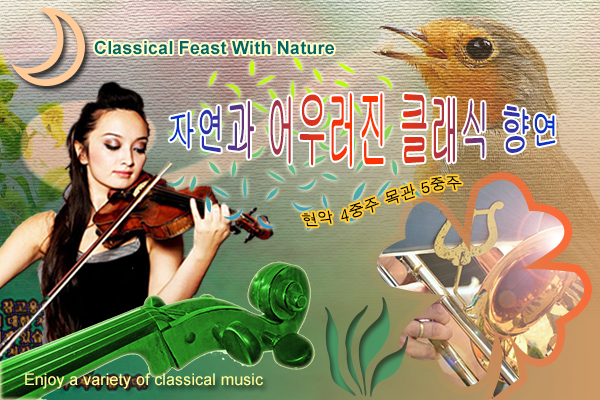
<style>
.page{position:relative;width:600px;height:400px}
.page>*{position:absolute;margin:0}
.t1{font:18px "Arial-BoldMT";letter-spacing:0.01em;color:#006666}
.t2{font:30px "Gulim";letter-spacing:0.01em}
.t3{font:16px "Dotum";letter-spacing:0.01em;color:#000000}
.t4{font:16px "ArialMT";letter-spacing:0.01em;color:#ffff99}
</style>
<div class="page">
<p class="t1" style="left:94px;top:40px;width:240px;height:15px">Classical Feast With Nature</p>
<p class="t2" style="left:169px;top:93px;width:387px;height:74px;text-align:center">자연과 어우러진 클래식 향연</p>
<p class="t3" style="left:301px;top:176px;width:161px;height:51px;rotate:-13deg">현악 4중주 목관 5중주</p>
<p class="t4" style="left:25px;top:373px;width:238px;height:16px">Enjoy a variety of classical music</p>
</div>
